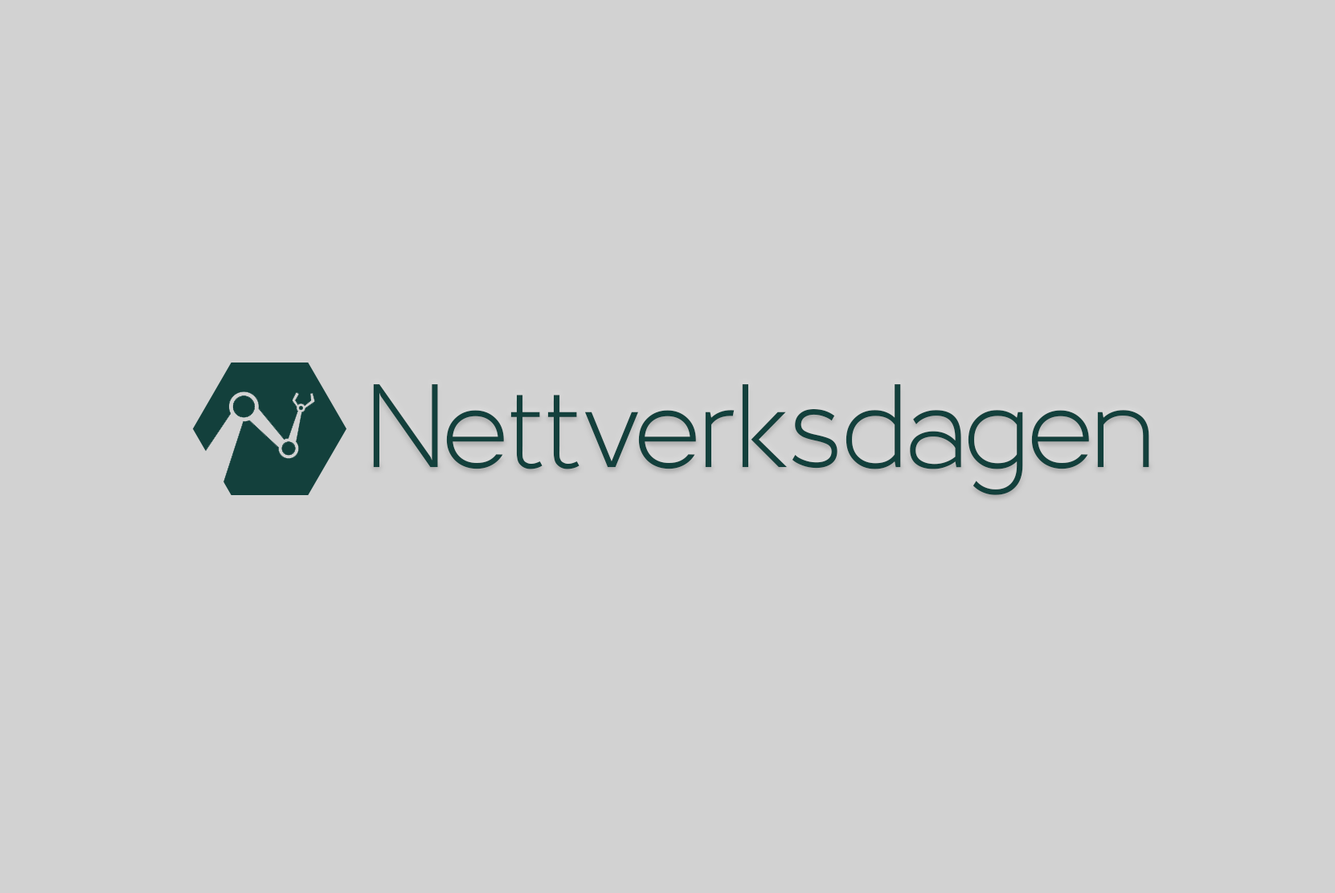
<style>
.page{position:relative;width:1335px;height:893px;background:#d2d2d2}
.page>*{position:absolute;margin:0}
.t1{font:160.8px "Larke-Regular";color:#13403c}
</style>
<div class="page">
<p class="t1" style="left:373px;top:384px;width:777px;height:111px">Nettverksdagen</p>
</div>
